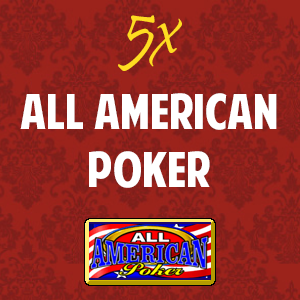
<style>
.page{position:relative;width:300px;height:300px}
.page>*{position:absolute;margin:0}
.t1{font:72px "Pristina-Regular";color:#fedc21}
.t2{font:48px "AmericanPurpose";color:#ffffff}
</style>
<div class="page">
<p class="t1" style="left:118px;top:15px;width:64px;height:56px">5x</p>
<p class="t2" style="left:20px;top:93px;width:257px;height:95px;text-align:center">ALL AMERICAN<br>POKER</p>
</div>
